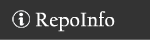
<style>
.page{position:relative;width:150px;height:40px;background:#333333}
.page>*{position:absolute;margin:0}
.t1{font:20px "CalifornianFB-Reg";color:#ffffff;font-weight:bold}
</style>
<div class="page">
<p class="t1" style="left:35px;top:11px;width:80px;height:21px">RepoInfo</p>
</div>
